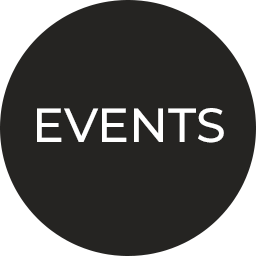
<style>
.page{position:relative;width:256px;height:256px;background:#252422}
.page>*{position:absolute;margin:0}
.t1{font:48px "Montserrat-Medium";color:#ffffff}
</style>
<div class="page">
<p class="t1" style="left:37px;top:108px;width:187px;height:35px">EVENTS</p>
</div>
